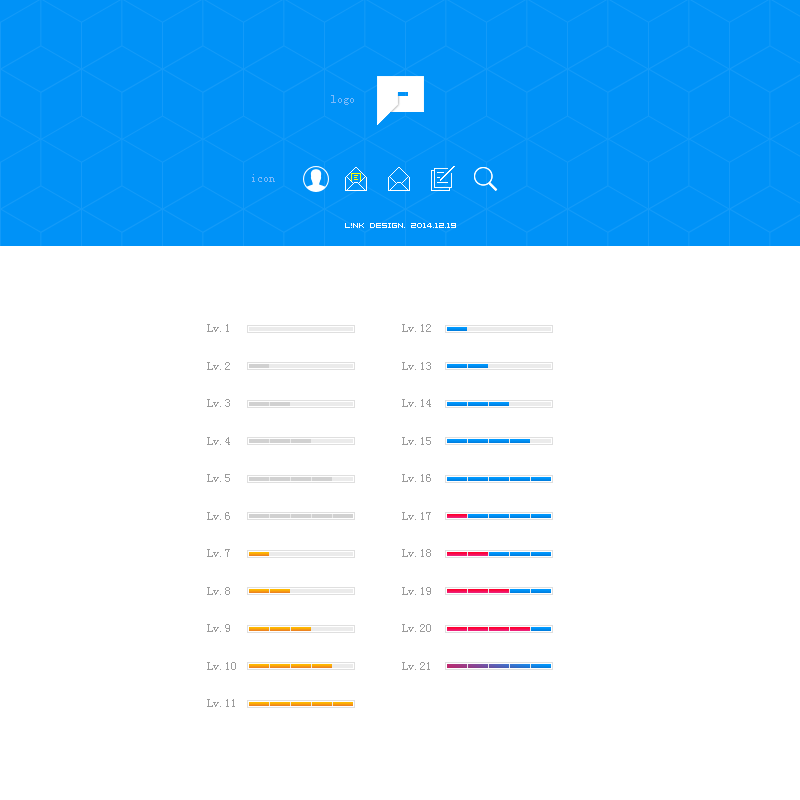
<style>
.page{position:relative;width:800px;height:800px;background:#ffffff}
.page>*{position:absolute;margin:0}
.t1{font:12px "SimSun";color:#7cbafa}
.t2{font:6px "04b08";color:#ffffff}
.t3{font:12px/37.5px "SimSun";color:#9b9b9b}
</style>
<div class="page">
<p class="t1" style="left:331px;top:95px;width:23px;height:10px">logo</p>
<p class="t1" style="left:252px;top:174px;width:23px;height:8px">icon</p>
<p class="t2" style="left:345px;top:223px;width:111px;height:5px">l!nk design. 2014.12.19</p>
<p class="t3" style="left:207px;top:324px;width:29px;height:383px">Lv.1<br>Lv.2<br>Lv.3<br>Lv.4<br>Lv.5<br>Lv.6<br>Lv.7<br>Lv.8<br>Lv.9<br>Lv.10<br>Lv.11</p>
<p class="t3" style="left:402px;top:324px;width:29px;height:346px">Lv.12<br>Lv.13<br>Lv.14<br>Lv.15<br>Lv.16<br>Lv.17<br>Lv.18<br>Lv.19<br>Lv.20<br>Lv.21</p>
</div>
